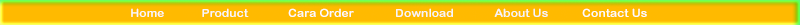
<style>
.page{position:relative;width:800px;height:25px;background:#ffba00}
.page>*{position:absolute;margin:0}
.t1{font:11.3px "ArialRoundedMTBold";color:#f8f8fb;scale:1.07 1}
.t2{font:11.3px "ArialRoundedMTBold";color:#f7f7fa;scale:1.07 1}
.t3{font:11.3px "ArialRoundedMTBold";color:#fbfbfe;scale:1.07 1}
.t4{font:11.3px "ArialRoundedMTBold";color:#f6f6f8;scale:1.07 1}
.t5{font:11.3px "ArialRoundedMTBold";color:#f5f5f7;scale:1.07 1}
.t6{font:11.3px "ArialRoundedMTBold";color:#fcfcfd;scale:1.07 1}
</style>
<div class="page">
<p class="t1" style="left:131px;top:8px;width:33px;height:9px">Home</p>
<p class="t2" style="left:202px;top:8px;width:47px;height:9px">Product</p>
<p class="t3" style="left:288px;top:8px;width:66px;height:9px">Cara Order</p>
<p class="t4" style="left:396px;top:8px;width:57px;height:9px">Download</p>
<p class="t5" style="left:494px;top:8px;width:54px;height:9px">About Us</p>
<p class="t6" style="left:582px;top:8px;width:65px;height:9px">Contact Us</p>
</div>
